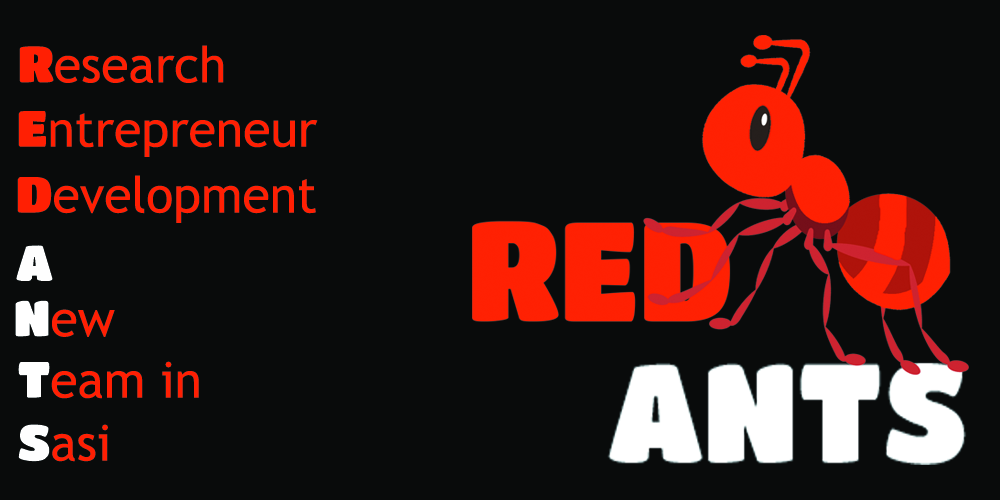
<style>
.page{position:relative;width:1000px;height:500px;background:#090b0b}
.page>*{position:absolute;margin:0}
.t1{font:50px "TrebuchetMS";color:#ff1f03}
.t2{font:50px "TitanOne";color:#ff1f03}
.t3{font:50px "TitanOne";color:#fefefe}
.t4{font:50px "TitanOne";color:#ffffff}
</style>
<div class="page">
<p class="t1" style="left:19px;top:45px;width:205px;height:38px"><span class="t2">R</span>esearch</p>
<p class="t1" style="left:18px;top:111px;width:300px;height:46px"><span class="t2">E</span>ntrepreneur</p>
<p class="t1" style="left:17px;top:175px;width:299px;height:48px"><span class="t2">D</span>evelopment</p>
<p class="t3" style="left:16px;top:245px;width:37px;height:36px">A</p>
<p class="t1" style="left:15px;top:300px;width:100px;height:37px"><span class="t4">N</span>ew</p>
<p class="t1" style="left:18px;top:361px;width:181px;height:38px"><span class="t4">T</span>eam in</p>
<p class="t1" style="left:18px;top:424px;width:90px;height:38px"><span class="t3">S</span>asi</p>
</div>
